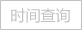
<style>
.page{position:relative;width:82px;height:30px;background:#ffffff}
.page>*{position:absolute;margin:0}
.t1{font:15px "MicrosoftYaHei";color:#c1c1c1}
</style>
<div class="page">
<p class="t1" style="left:11px;top:8px;width:59px;height:15px">时间查询</p>
</div>
